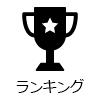
<style>
.page{position:relative;width:100px;height:100px;background:#ffffff}
.page>*{position:absolute;margin:0}
.t1{font:13.6px "Meiryo";color:#000000}
</style>
<div class="page">
<p class="t1" style="left:16px;top:79px;width:68px;height:14px">ランキング</p>
</div>
